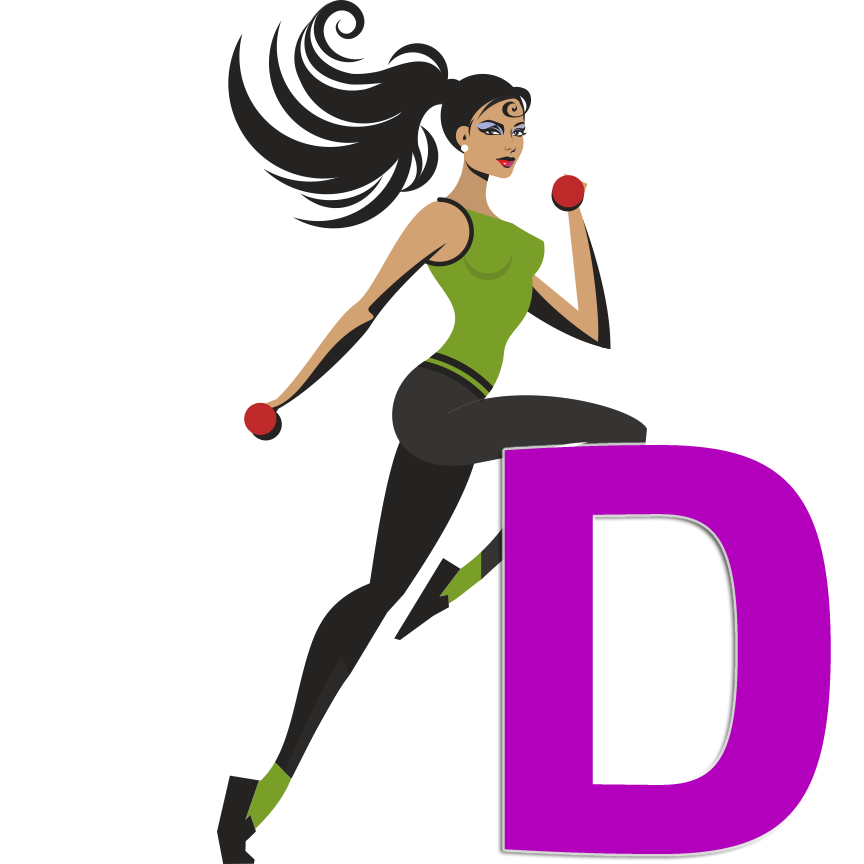
<style>
.page{position:relative;width:864px;height:864px;background:#ffffff}
.page>*{position:absolute;margin:0}
.t1{font:578.2px "Exo2-Bold";letter-spacing:0.01em;color:#b200bd}
</style>
<div class="page">
<p class="t1" style="left:504px;top:445px;width:327px;height:409px">D</p>
</div>
